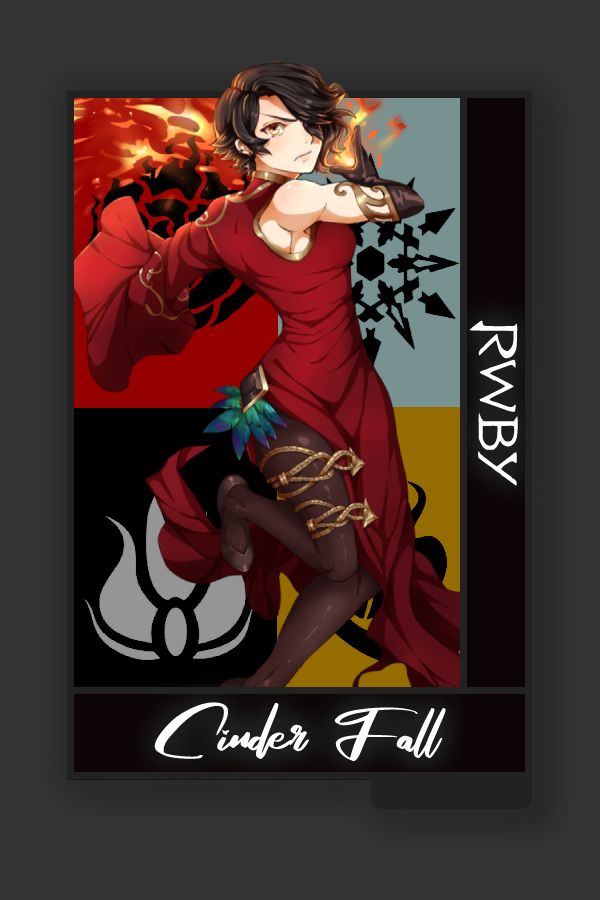
<style>
.page{position:relative;width:600px;height:900px;background:#333333}
.page>*{position:absolute;margin:0}
.t1{font:61.3px "RWBY_Style";color:#ffffff;scale:1.25 1}
.t2{font:75px "RosegaFREE";color:#ffffff}
</style>
<div class="page">
<p class="t1" style="left:469px;top:320px;width:49px;height:166px;rotate:90deg">RWBY</p>
<p class="t2" style="left:154px;top:702px;width:292px;height:60px">Cinder Fall</p>
</div>
